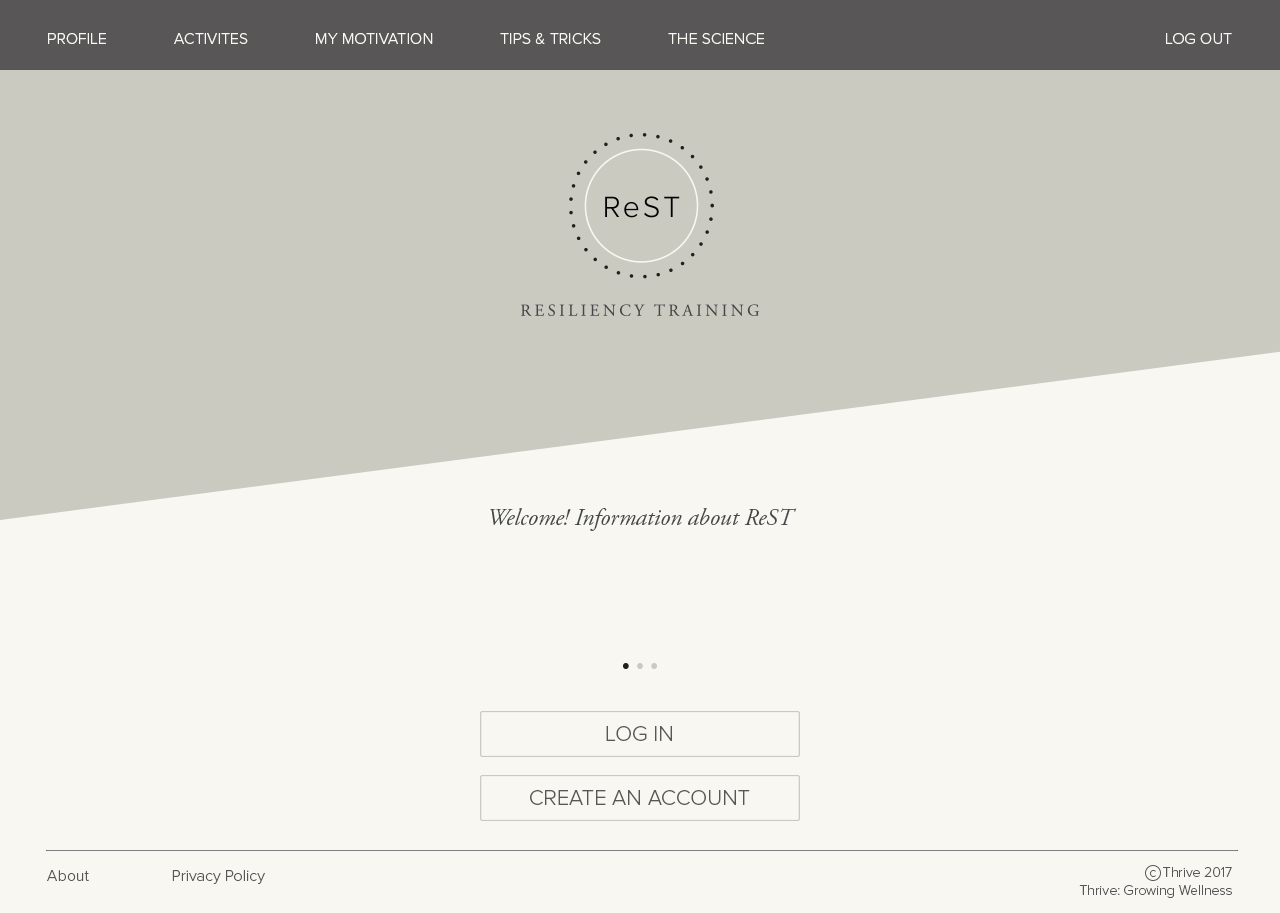
<style>
.page{position:relative;width:1280px;height:913px;background:#f8f7f1}
.page>*{position:absolute;margin:0}
.t1{font:16px "ProximaNova-Light";color:#f8f7f1}
.t2{font:24px "AGaramondPro-Italic";color:#434647}
.t3{font:22px "ProximaNova-Light";color:#585657}
.t4{font:16px "ProximaNova-Light";color:#585657}
.t5{font:14px/13px "ProximaNova-Light";color:#585657}
</style>
<div class="page">
<p class="t1" style="left:48px;top:33px;width:58px;height:11px">PROFILE</p>
<p class="t1" style="left:174px;top:33px;width:74px;height:11px">ACTIVITES</p>
<p class="t1" style="left:316px;top:33px;width:117px;height:11px">MY MOTIVATION</p>
<p class="t1" style="left:500px;top:33px;width:101px;height:11px">TIPS &amp; TRICKS</p>
<p class="t1" style="left:668px;top:33px;width:96px;height:11px">THE SCIENCE</p>
<p class="t1" style="left:1166px;top:33px;width:66px;height:11px">LOG OUT</p>
<p class="t2" style="left:490px;top:508px;width:307px;height:23px">Welcome! Information about ReST</p>
<p class="t3" style="left:606px;top:726px;width:66px;height:15px">LOG IN</p>
<p class="t3" style="left:530px;top:790px;width:220px;height:15px">CREATE AN ACCOUNT</p>
<p class="t4" style="left:47px;top:870px;width:42px;height:11px">About</p>
<p class="t4" style="left:172px;top:870px;width:93px;height:14px">Privacy Policy</p>
<p class="t5" style="left:1079px;top:867px;width:153px;height:31px;text-align:right">c  Thrive 2017<br>Thrive: Growing Wellness</p>
</div>
